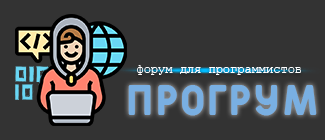
<style>
.page{position:relative;width:325px;height:140px;background:#333333}
.page>*{position:absolute;margin:0}
.t1{font:12px "CourierNewPSMT";color:#ffffff}
.t2{font:42px "Fulbo-Argenta";color:#79afe2}
</style>
<div class="page">
<p class="t1" style="left:137px;top:65px;width:164px;height:10px">форум для программистов</p>
<p class="t2" style="left:128px;top:85px;width:189px;height:31px">прогрум</p>
</div>
